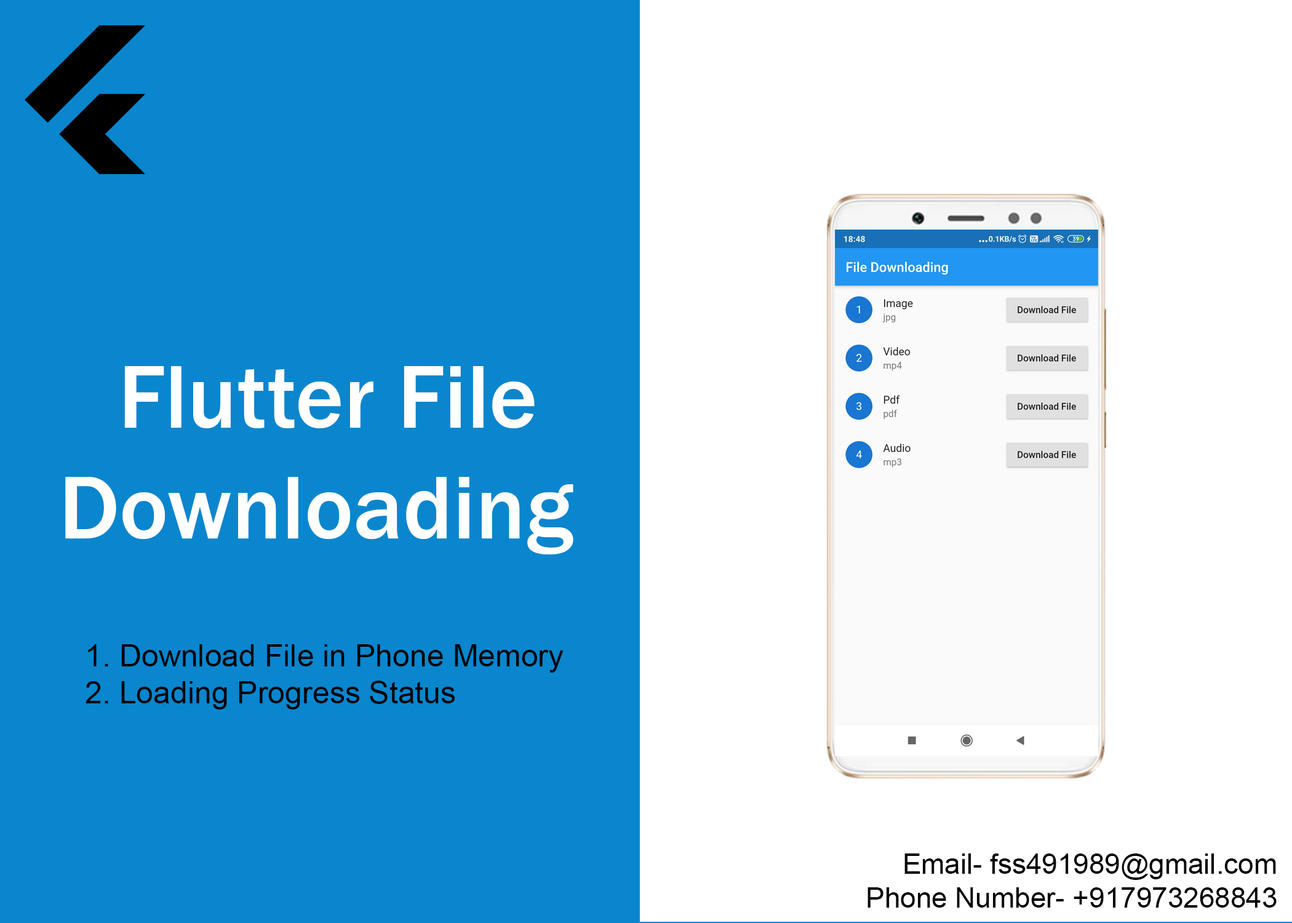
<style>
.page{position:relative;width:1292px;height:923px;background:#0986ce}
.page>*{position:absolute;margin:0}
.t1{font:92.3px "FranklinGothic-Medium";color:#ffffff}
.t2{font:30.8px "ArialMT";color:#000000}
.t3{font:28.2px "ArialMT";color:#000000}
</style>
<div class="page">
<p class="t1" style="left:65px;top:366px;width:508px;height:188px;text-align:center">Flutter File <br>Downloading</p>
<p class="t2" style="left:86px;top:644px;width:478px;height:65px">1. Download File in Phone Memory<br>2. Loading Progress Status</p>
<p class="t3" style="left:868px;top:853px;width:409px;height:55px;text-align:right">Email- fss491989@gmail.com<br>Phone Number- +917973268843</p>
</div>
